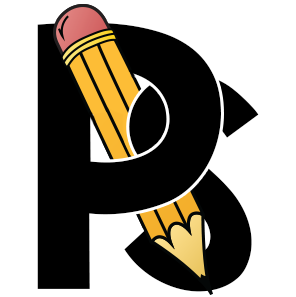
<style>
.page{position:relative;width:296px;height:297px;background:#ffffff}
.page>*{position:absolute;margin:0}
.t1{font:300px "KGBlankSpaceSolid";letter-spacing:0.05em;color:#000000}
.t2{font:243.7px "KGBlankSpaceSolid";letter-spacing:0.05em;color:#000000}
</style>
<div class="page">
<p class="t1" style="left:37px;top:22px;width:184px;height:267px">P</p>
<p class="t2" style="left:124px;top:73px;width:135px;height:219px;rotate:1deg">S</p>
</div>
